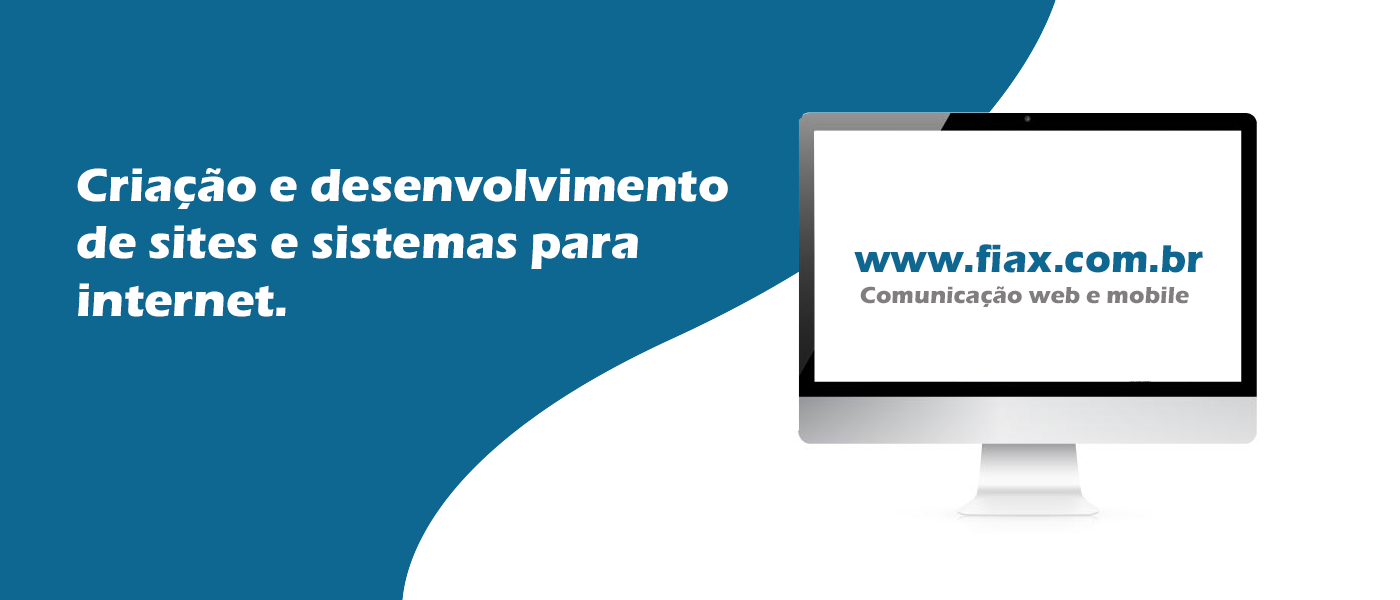
<style>
.page{position:relative;width:1400px;height:600px;background:#0d6791}
.page>*{position:absolute;margin:0}
.t1{font:48px "ErasITC-Bold";color:#ffffff}
.t2{font:40px "ErasITC-Bold";color:#0d6791}
.t3{font:24px "ErasITC-Bold";color:#807e7e}
</style>
<div class="page">
<p class="t1" style="left:77px;top:168px;width:651px;height:149px">Criação e desenvolvimento<br>de sites e sistemas para<br>internet.</p>
<p class="t2" style="left:854px;top:244px;width:349px;height:29px">www.fiax.com.br</p>
<p class="t3" style="left:860px;top:286px;width:329px;height:21px">Comunicação web e mobile</p>
</div>
